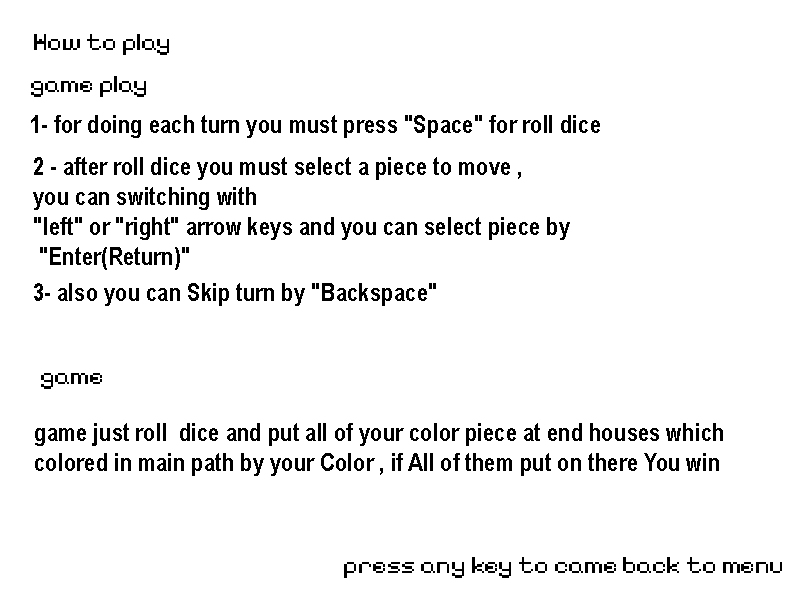
<style>
.page{position:relative;width:800px;height:600px;background:#ffffff}
.page>*{position:absolute;margin:0}
.t1{font:25px "PixelifySans-Regular";color:#000000}
.t2{font:25px "ArialNarrow-Bold";color:#000000}
</style>
<div class="page">
<p class="t1" style="left:34px;top:34px;width:135px;height:21px">How to play</p>
<p class="t1" style="left:31px;top:76px;width:115px;height:21px">game play</p>
<p class="t2" style="left:31px;top:115px;width:569px;height:23px">1- for doing each turn you must press "Space" for roll dice</p>
<p class="t2" style="left:33px;top:157px;width:537px;height:113px">2 - after roll dice you must select a piece to move , <br>you can switching with <br>"left" or "right" arrow keys and you can select piece by<br> "Enter(Return)"</p>
<p class="t2" style="left:34px;top:283px;width:402px;height:23px">3- also you can Skip turn by "Backspace"</p>
<p class="t1" style="left:41px;top:373px;width:61px;height:16px">game</p>
<p class="t2" style="left:35px;top:423px;width:688px;height:53px">game just roll  dice and put all of your color piece at end houses which <br>colored in main path by your Color , if All of them put on there You win</p>
<p class="t1" style="left:344px;top:557px;width:438px;height:21px">press any key to came back to menu</p>
</div>
